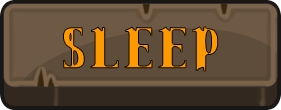
<style>
.page{position:relative;width:281px;height:110px}
.page>*{position:absolute;margin:0}
.t1{font:60px "Hangyaku";letter-spacing:0.1em;color:#ff9900;font-weight:bold}
</style>
<div class="page">
<p class="t1" style="left:63px;top:26px;width:156px;height:46px">SLEEP</p>
</div>
